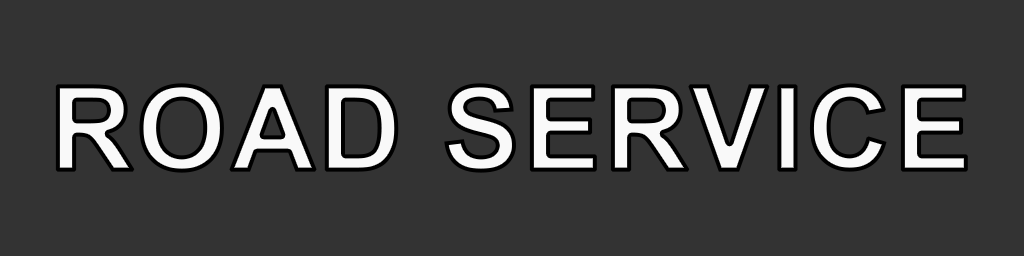
<style>
.page{position:relative;width:1024px;height:256px;background:#333333}
.page>*{position:absolute;margin:0}
.t1{font:117px "Arial-BoldMT";font-weight:bold}
</style>
<div class="page">
<p class="t1" style="left:55px;top:83px;width:913px;height:90px">ROAD SERVICE</p>
</div>
